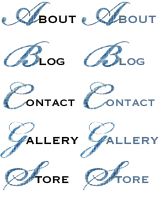
<style>
.page{position:relative;width:160px;height:200px;background:#ffffff}
.page>*{position:absolute;margin:0}
.t1{font:16.2px "Copperplate";color:#000000}
.t2{font:16.2px "Copperplate";color:#547394}
.t3{font:15.2px "Copperplate";color:#000000}
.t4{font:15.2px "Copperplate";color:#547394}
.t5{font:14.5px "Copperplate";color:#000000}
.t6{font:14.5px "Copperplate";color:#547394}
.t7{font:15.6px "Copperplate";color:#000000}
.t8{font:15.6px "Copperplate";color:#547394}
.t9{font:15.1px "Copperplate";color:#000000}
.t10{font:15.1px "Copperplate";color:#547394}
</style>
<div class="page">
<p class="t1" style="left:39px;top:15px;width:37px;height:9px">bout</p>
<p class="t2" style="left:119px;top:15px;width:37px;height:9px">bout</p>
<p class="t3" style="left:39px;top:58px;width:26px;height:8px">log</p>
<p class="t4" style="left:119px;top:58px;width:26px;height:8px">log</p>
<p class="t5" style="left:26px;top:99px;width:49px;height:8px">ontact</p>
<p class="t6" style="left:106px;top:99px;width:49px;height:8px">ontact</p>
<p class="t7" style="left:26px;top:136px;width:53px;height:9px">allery</p>
<p class="t8" style="left:106px;top:136px;width:53px;height:9px">allery</p>
<p class="t9" style="left:35px;top:176px;width:34px;height:8px">tore</p>
<p class="t10" style="left:115px;top:176px;width:34px;height:8px">tore</p>
</div>
